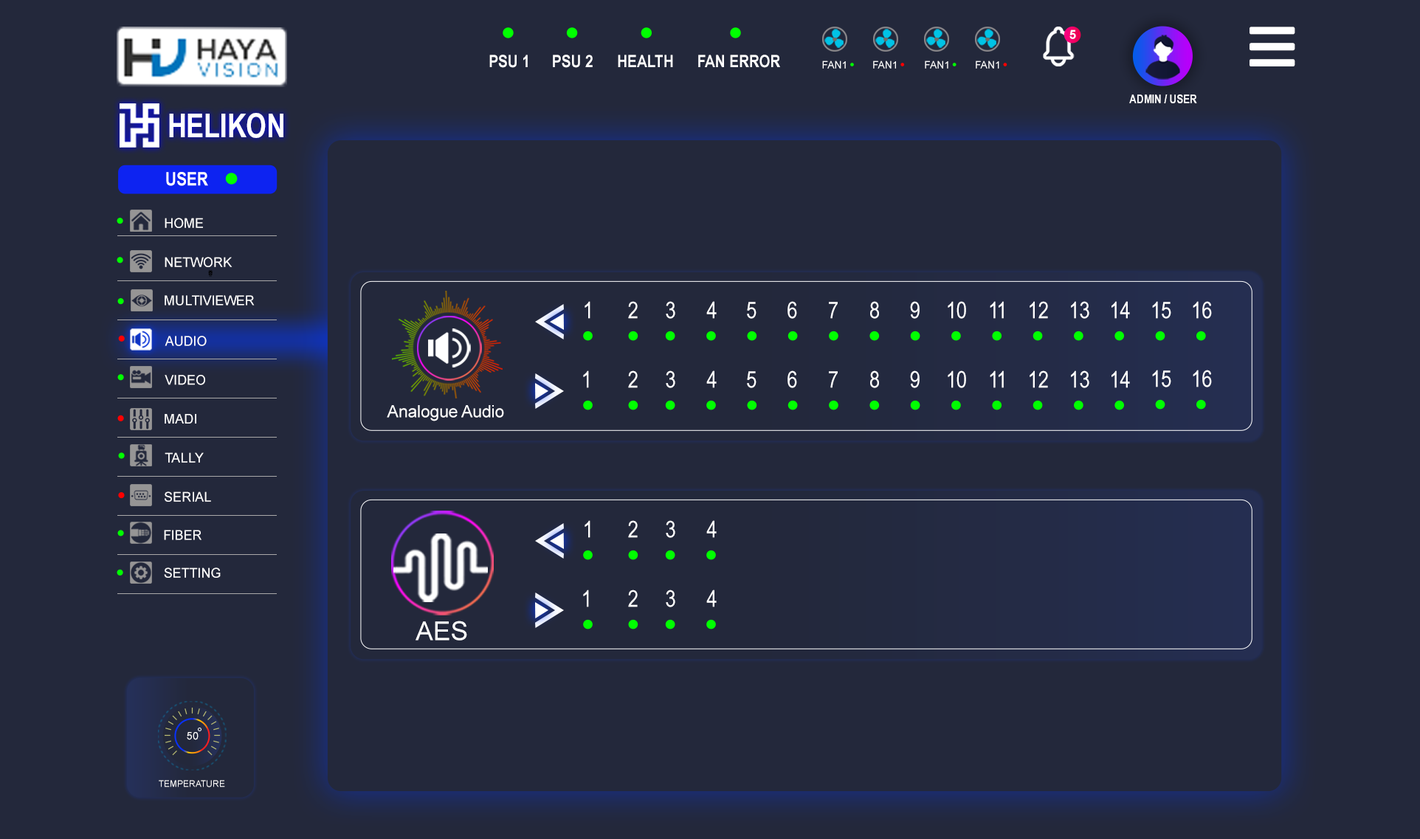
<style>
.page{position:relative;width:1420px;height:839px;background:#23283b}
.page>*{position:absolute;margin:0}
.t1{font:12.3px "Arial-BoldMT";color:#ffffff}
.t2{font:17px "ArialNarrow-Bold";color:#ffffff}
.t3{font:10.4px "ArialMT";color:#ffffff}
.t4{font:11.8px "ArialNarrow-Bold";color:#ffffff}
.t5{font:32.8px "Arial-BoldMT";color:#ffffff;scale:0.81 1}
.t6{font:18.5px "ArialNarrow-Bold";color:#ffffff}
.t7{font:13.3px "ArialMT";color:#ffffff}
.t8{font:23.1px "ArialNarrow";color:#ffffff}
.t9{font:17px "ArialMT";color:#ffffff}
.t10{font:13.3px "ArialMT";color:#fffefe}
.t11{font:26px "ArialMT";color:#ffffff}
.t12{font:10.7px "ArialMT";color:#ffffff}
.t13{font:8.9px "ArialMT";color:#ffffff}
</style>
<div class="page">
<p class="t1" style="left:1070px;top:30px;width:6px;height:9px">5</p>
<p class="t2" style="left:489px;top:55px;width:39px;height:13px">PSU 1</p>
<p class="t2" style="left:553px;top:55px;width:40px;height:13px">PSU 2</p>
<p class="t2" style="left:618px;top:55px;width:55px;height:12px">HEALTH</p>
<p class="t2" style="left:698px;top:55px;width:82px;height:13px">FAN ERROR</p>
<p class="t3" style="left:822px;top:61px;width:24px;height:8px">FAN1</p>
<p class="t3" style="left:873px;top:61px;width:23px;height:8px">FAN1</p>
<p class="t3" style="left:925px;top:61px;width:24px;height:8px">FAN1</p>
<p class="t3" style="left:976px;top:61px;width:24px;height:8px">FAN1</p>
<p class="t4" style="left:1130px;top:95px;width:68px;height:8px">ADMIN / USER</p>
<p class="t5" style="left:169px;top:113px;width:115px;height:25px">HELIKON</p>
<p class="t6" style="left:166px;top:172px;width:42px;height:14px">USER</p>
<p class="t7" style="left:165px;top:218px;width:38px;height:10px">HOME</p>
<p class="t7" style="left:165px;top:257px;width:68px;height:10px">NETWORK</p>
<p class="t7" style="left:165px;top:295px;width:90px;height:11px">MULTIVIEWER</p>
<p class="t8" style="left:585px;top:301px;width:6px;height:18px">1</p>
<p class="t8" style="left:628px;top:301px;width:10px;height:18px">2</p>
<p class="t8" style="left:666px;top:301px;width:10px;height:18px">3</p>
<p class="t8" style="left:707px;top:301px;width:10px;height:18px">4</p>
<p class="t8" style="left:747px;top:302px;width:10px;height:17px">5</p>
<p class="t8" style="left:788px;top:301px;width:9px;height:18px">6</p>
<p class="t8" style="left:829px;top:302px;width:9px;height:17px">7</p>
<p class="t8" style="left:870px;top:301px;width:9px;height:18px">8</p>
<p class="t8" style="left:910px;top:301px;width:10px;height:18px">9</p>
<p class="t8" style="left:948px;top:301px;width:18px;height:18px">10</p>
<p class="t8" style="left:990px;top:301px;width:14px;height:18px">11</p>
<p class="t8" style="left:1030px;top:301px;width:18px;height:18px">12</p>
<p class="t8" style="left:1071px;top:301px;width:19px;height:18px">13</p>
<p class="t8" style="left:1112px;top:301px;width:18px;height:18px">14</p>
<p class="t8" style="left:1152px;top:301px;width:20px;height:18px">15</p>
<p class="t8" style="left:1193px;top:301px;width:19px;height:18px">16</p>
<p class="t7" style="left:165px;top:336px;width:42px;height:10px">AUDIO</p>
<p class="t7" style="left:165px;top:375px;width:40px;height:10px">VIDEO</p>
<p class="t8" style="left:583px;top:371px;width:6px;height:17px">1</p>
<p class="t8" style="left:628px;top:371px;width:10px;height:17px">2</p>
<p class="t8" style="left:666px;top:371px;width:10px;height:17px">3</p>
<p class="t8" style="left:707px;top:371px;width:10px;height:17px">4</p>
<p class="t8" style="left:747px;top:371px;width:10px;height:17px">5</p>
<p class="t8" style="left:788px;top:371px;width:9px;height:17px">6</p>
<p class="t8" style="left:829px;top:371px;width:9px;height:17px">7</p>
<p class="t8" style="left:870px;top:371px;width:9px;height:17px">8</p>
<p class="t8" style="left:910px;top:371px;width:10px;height:17px">9</p>
<p class="t8" style="left:948px;top:371px;width:18px;height:17px">10</p>
<p class="t8" style="left:990px;top:371px;width:14px;height:17px">11</p>
<p class="t8" style="left:1030px;top:371px;width:18px;height:17px">12</p>
<p class="t8" style="left:1071px;top:371px;width:19px;height:17px">13</p>
<p class="t8" style="left:1112px;top:371px;width:18px;height:17px">14</p>
<p class="t8" style="left:1152px;top:370px;width:20px;height:18px">15</p>
<p class="t8" style="left:1193px;top:370px;width:19px;height:18px">16</p>
<p class="t9" style="left:387px;top:405px;width:117px;height:17px">Analogue Audio</p>
<p class="t7" style="left:165px;top:414px;width:31px;height:10px">MADI</p>
<p class="t7" style="left:165px;top:453px;width:39px;height:10px">TALLY</p>
<p class="t10" style="left:165px;top:492px;width:46px;height:10px">SERIAL</p>
<p class="t8" style="left:585px;top:521px;width:6px;height:17px">1</p>
<p class="t8" style="left:628px;top:521px;width:10px;height:17px">2</p>
<p class="t8" style="left:666px;top:521px;width:10px;height:17px">3</p>
<p class="t8" style="left:707px;top:521px;width:10px;height:17px">4</p>
<p class="t7" style="left:164px;top:530px;width:38px;height:10px">FIBER</p>
<p class="t7" style="left:164px;top:568px;width:57px;height:10px">SETTING</p>
<p class="t8" style="left:583px;top:590px;width:6px;height:18px">1</p>
<p class="t8" style="left:628px;top:590px;width:10px;height:18px">2</p>
<p class="t8" style="left:666px;top:590px;width:10px;height:18px">3</p>
<p class="t8" style="left:707px;top:590px;width:10px;height:18px">4</p>
<p class="t11" style="left:416px;top:621px;width:51px;height:20px">AES</p>
<p class="t12" style="left:187px;top:732px;width:12px;height:9px">50</p>
<p class="t13" style="left:159px;top:780px;width:66px;height:8px">TEMPERATURE</p>
</div>
